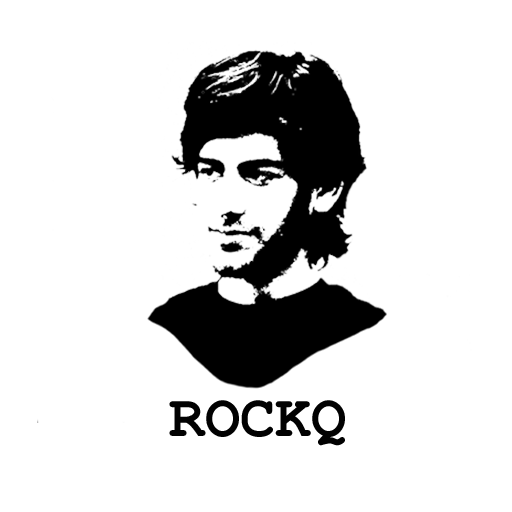
<style>
.page{position:relative;width:512px;height:512px;background:#ffffff}
.page>*{position:absolute;margin:0}
.t1{font:58.7px "CourierNewPS-BoldMT";color:#010101}
</style>
<div class="page">
<p class="t1" style="left:169px;top:400px;width:176px;height:46px">ROCKQ</p>
</div>
